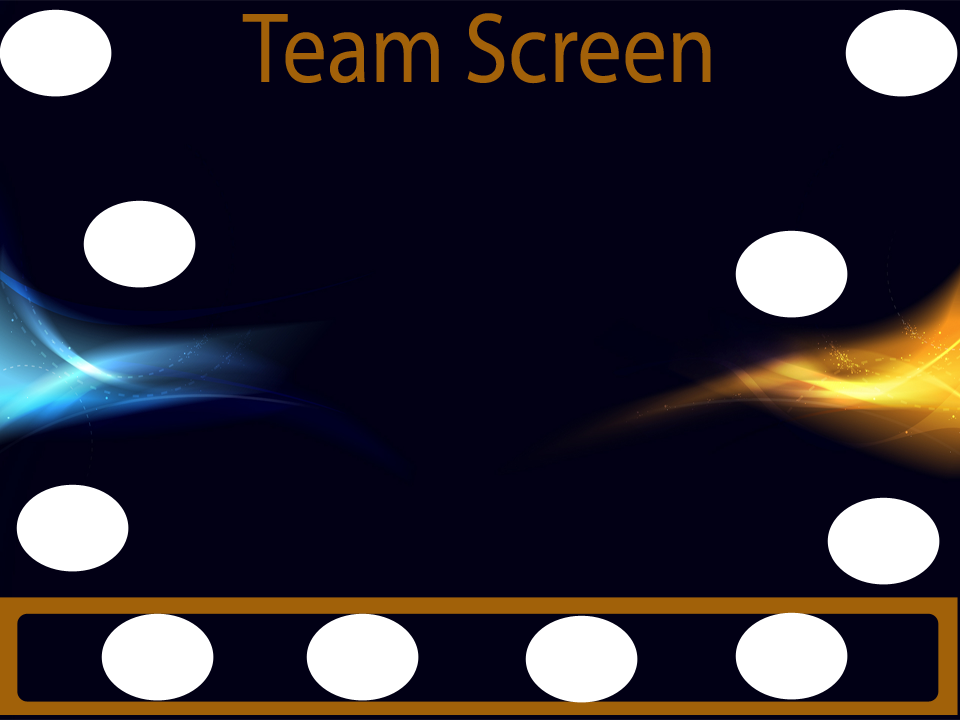
<style>
.page{position:relative;width:960px;height:720px;background:#020015}
.page>*{position:absolute;margin:0}
.t1{font:100.5px "MyriadPro-Regular";color:#a26109;scale:0.89 1}
</style>
<div class="page">
<p class="t1" style="left:242px;top:13px;width:469px;height:71px">Team Screen</p>
</div>
